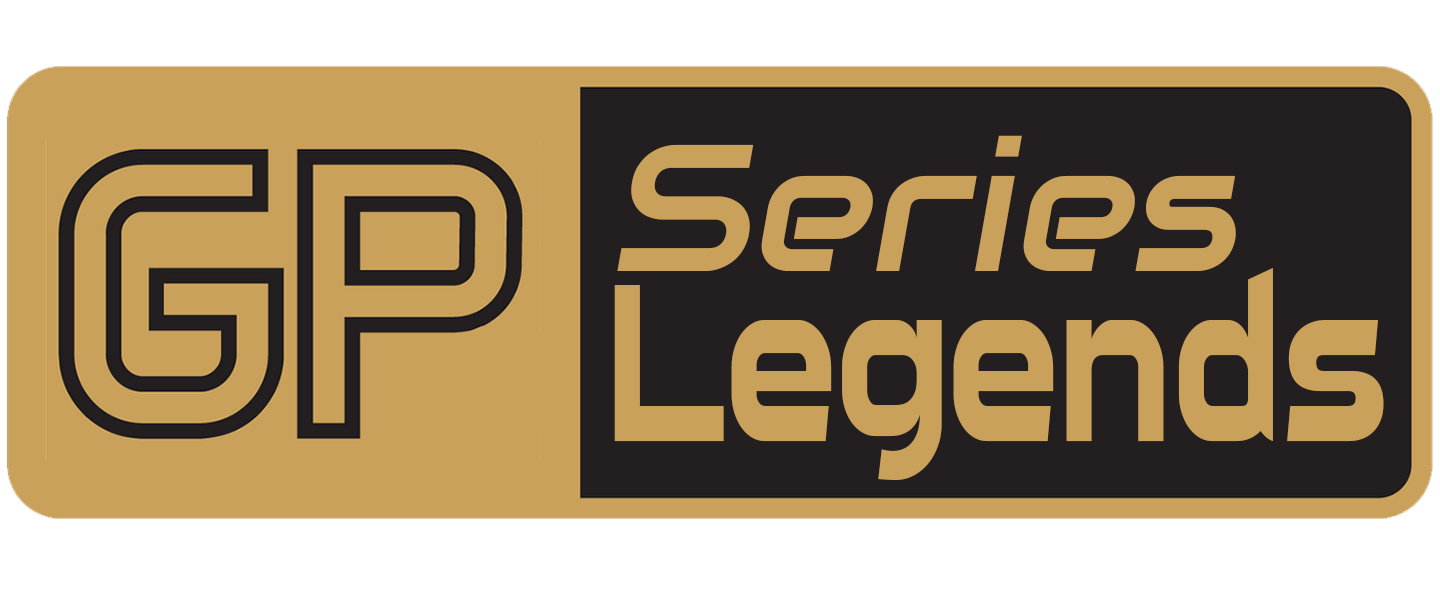
<style>
.page{position:relative;width:1440px;height:600px;background:#c9a15a}
.page>*{position:absolute;margin:0}
.t1{font:216px/170.9px "SuiGenerisFree";color:#c9a15a;scale:0.71 1}
.t2{font:180px/170.9px "Audiowide-Regular";color:#c9a15a;font-style:italic}
</style>
<div class="page">
<p class="t1" style="left:614px;top:135px;width:770px;height:345px"><span class="t2">Series<br></span>Legends</p>
</div>
